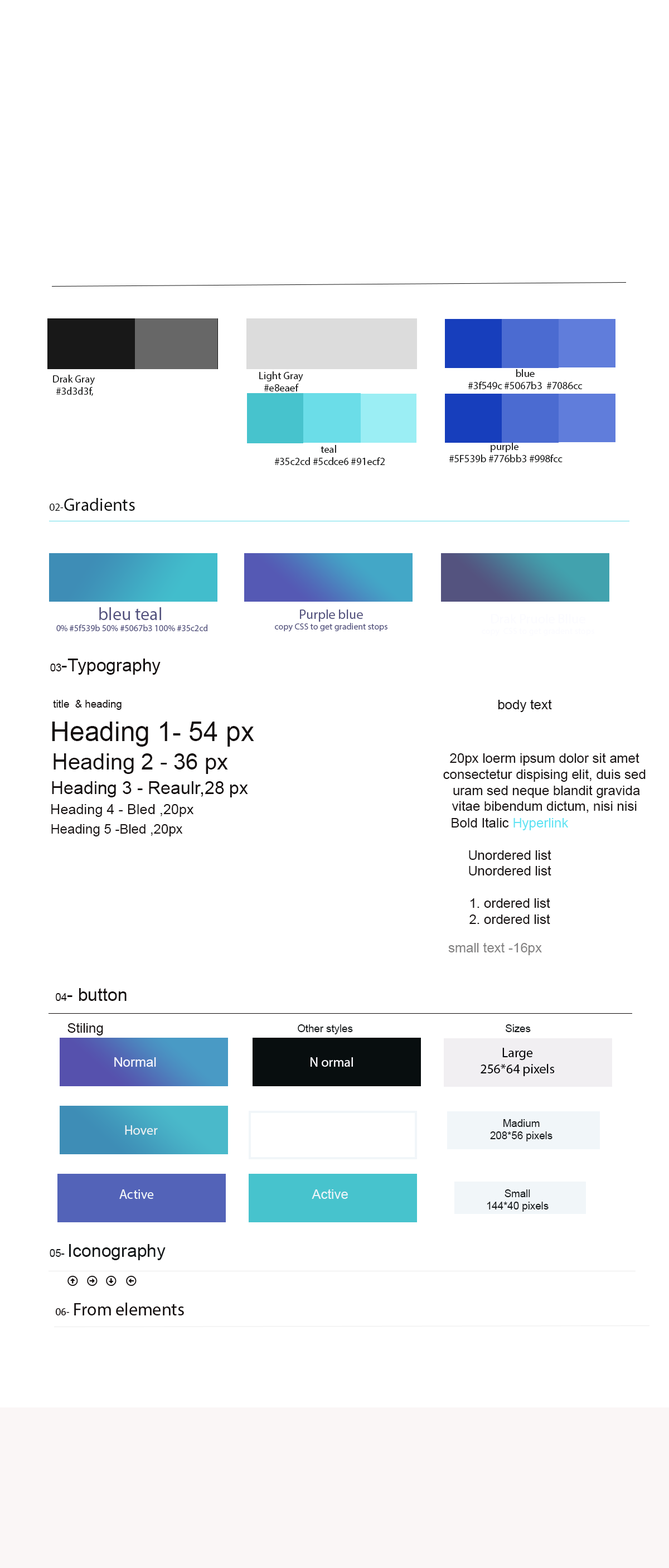
<style>
.page{position:relative;width:669px;height:1568px;background:#ffffff}
.page>*{position:absolute;margin:0}
.t1{font:10.4px "MyriadPro-Regular";color:#0e0f0f}
.t2{font:17.8px "MyriadPro-Regular";color:#0e0f0f}
.t3{font:8.9px "MyriadPro-Regular";color:#54537f}
.t4{font:17.8px "MyriadPro-Regular";color:#54537f}
.t5{font:13.4px "MyriadPro-Regular";color:#54537f}
.t6{font:17.8px "ArialMT";color:#140f0f}
.t7{font:10.4px "ArialMT";color:#140f0f}
.t8{font:13.4px "ArialMT";color:#181313}
.t9{font:26.8px "ArialMT";color:#140f0f}
.t10{font:22.3px "ArialMT";color:#140f0f}
.t11{font:14.1px "ArialMT";color:#140f0f}
.t12{font:13.4px "ArialMT";color:#5ee3f3}
.t13{font:13.4px "ArialMT";color:#838282}
.t14{font:13.4px "ArialMT";color:#140f0f}
.t15{font:10.4px "ArialMT";color:#14181a}
.t16{font:13.4px "MyriadPro-Regular";color:#020204}
.t17{font:13.4px "ArialMT";color:#f6f6fd}
.t18{font:13.4px "MyriadPro-Regular";color:#fbfbff}
.t19{font:13.4px "MyriadPro-Regular";color:#ebf0f2}
.t20{font:13.4px "MyriadPro-Regular";color:#f1f6f9}
.t21{font:13.4px "ArialMT";color:#ecf4f9}
.t22{font:17.8px "ArialMT";color:#14181a}
</style>
<div class="page">
<p class="t1" style="left:53px;top:375px;width:42px;height:21px;text-align:center">Drak Gray <br>#3d3d3f,</p>
<p class="t1" style="left:259px;top:371px;width:44px;height:20px;text-align:center">Light Gray<br>#e8eaef</p>
<p class="t1" style="left:468px;top:369px;width:115px;height:20px;text-align:center">blue<br>#3f549c #5067b3  #7086cc</p>
<p class="t1" style="left:275px;top:445px;width:110px;height:20px;text-align:center">teal <br>#35c2cd #5cdce6 #91ecf2</p>
<p class="t1" style="left:449px;top:442px;width:114px;height:20px;text-align:center">purple <br>#5F539b #776bb3 #998fcc</p>
<p class="t2" style="left:64px;top:498px;width:71px;height:13px">Gradients</p>
<p class="t1" style="left:50px;top:504px;width:13px;height:7px">02-</p>
<p class="t3" style="left:56px;top:607px;width:151px;height:24px;text-align:center"><span class="t4"><br>bleu teal <br></span>0% #5f539b 50% #5067b3 100% #35c2cd</p>
<p class="t3" style="left:275px;top:609px;width:113px;height:23px;text-align:center"><span class="t5">Purple blue<br></span>copy CSS to get gradient stops</p>
<p class="t6" style="left:50px;top:659px;width:111px;height:16px"><span class="t7">03</span>-Typography</p>
<p class="t7" style="left:53px;top:700px;width:69px;height:10px">title  &amp; heading</p>
<p class="t8" style="left:498px;top:699px;width:54px;height:13px">body text</p>
<p class="t9" style="left:52px;top:722px;width:202px;height:25px">Heading 1- 54 px</p>
<p class="t10" style="left:54px;top:753px;width:174px;height:21px">Heading 2 - 36 px</p>
<p class="t8" style="left:443px;top:753px;width:203px;height:60px;text-align:center">20px loerm ipsum dolor sit amet <br>consectetur dispising elit, duis sed <br>uram sed neque blandit gravida<br>vitae bibendum dictum, nisi nisi</p>
<p class="t6" style="left:52px;top:781px;width:196px;height:16px">Heading 3 - Reaulr,28 px</p>
<p class="t11" style="left:51px;top:804px;width:143px;height:13px">Heading 4 - Bled ,20px</p>
<p class="t8" style="left:452px;top:817px;width:117px;height:107px;text-align:center">Bold Italic <span class="t12">Hyperlink<br><br></span>Unordered list<br>Unordered list<br><br>1. ordered list<br>2. ordered list</p>
<p class="t8" style="left:51px;top:824px;width:132px;height:12px">Heading 5 -Bled ,20px</p>
<p class="t13" style="left:448px;top:942px;width:94px;height:13px">small text -16px</p>
<p class="t6" style="left:56px;top:988px;width:71px;height:13px"><span class="t7">04</span>- button</p>
<p class="t14" style="left:67px;top:1023px;width:36px;height:12px">Stiling</p>
<p class="t15" style="left:298px;top:1024px;width:55px;height:10px">Other styles</p>
<p class="t15" style="left:506px;top:1024px;width:25px;height:8px">Sizes</p>
<p class="t16" style="left:481px;top:1048px;width:74px;height:28px;text-align:center">Large<br>256*64 pixels</p>
<p class="t17" style="left:114px;top:1057px;width:42px;height:10px">Normal</p>
<p class="t18" style="left:311px;top:1057px;width:42px;height:10px">N ormal</p>
<p class="t15" style="left:490px;top:1119px;width:63px;height:22px;text-align:center">Madium<br>208*56 pixels</p>
<p class="t19" style="left:125px;top:1125px;width:33px;height:10px">Hover</p>
<p class="t20" style="left:119px;top:1189px;width:35px;height:10px">Active</p>
<p class="t21" style="left:312px;top:1189px;width:36px;height:10px">Active</p>
<p class="t15" style="left:487px;top:1189px;width:62px;height:23px;text-align:center">Small<br>144*40 pixels</p>
<p class="t22" style="left:50px;top:1244px;width:116px;height:16px"><span class="t15">05- </span>Iconography</p>
</div>
